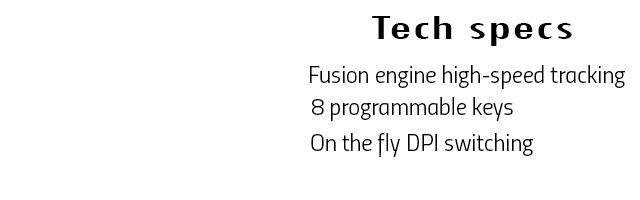
<style>
.page{position:relative;width:640px;height:200px;background:#ffffff}
.page>*{position:absolute;margin:0}
.t1{font:36.1px "TwCenMT-Condensed";color:#000000;scale:1.83 1}
.t2{font:24px "Titillium-LightUpright";color:#000000}
</style>
<div class="page">
<p class="t1" style="left:372px;top:16px;width:200px;height:30px">Tech specs</p>
<p class="t2" style="left:310px;top:65px;width:315px;height:24px">Fusion engine high-speed tracking</p>
<p class="t2" style="left:312px;top:97px;width:201px;height:24px">8 programmable keys</p>
<p class="t2" style="left:311px;top:133px;width:222px;height:24px">On the fly DPI switching</p>
</div>
